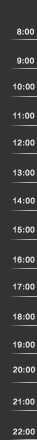
<style>
.page{position:relative;width:37px;height:440px;background:#333333}
.page>*{position:absolute;margin:0}
.t1{font:7.1px "FZLTZHK--GBK1-0";letter-spacing:0.015em;color:#e1e1e1;font-weight:bold}
</style>
<div class="page">
<p class="t1" style="left:17px;top:28px;width:17px;height:7px">8:00</p>
<p class="t1" style="left:17px;top:57px;width:17px;height:7px">9:00</p>
<p class="t1" style="left:13px;top:83px;width:22px;height:7px">10:00</p>
<p class="t1" style="left:13px;top:112px;width:22px;height:7px">11:00</p>
<p class="t1" style="left:13px;top:139px;width:22px;height:7px">12:00</p>
<p class="t1" style="left:13px;top:169px;width:22px;height:7px">13:00</p>
<p class="t1" style="left:13px;top:197px;width:22px;height:7px">14:00</p>
<p class="t1" style="left:13px;top:226px;width:22px;height:7px">15:00</p>
<p class="t1" style="left:13px;top:256px;width:22px;height:7px">16:00</p>
<p class="t1" style="left:13px;top:283px;width:22px;height:7px">17:00</p>
<p class="t1" style="left:13px;top:313px;width:22px;height:7px">18:00</p>
<p class="t1" style="left:13px;top:341px;width:22px;height:7px">19:00</p>
<p class="t1" style="left:13px;top:366px;width:22px;height:7px">20:00</p>
<p class="t1" style="left:13px;top:398px;width:22px;height:7px">21:00</p>
<p class="t1" style="left:13px;top:428px;width:22px;height:7px">22:00</p>
</div>
